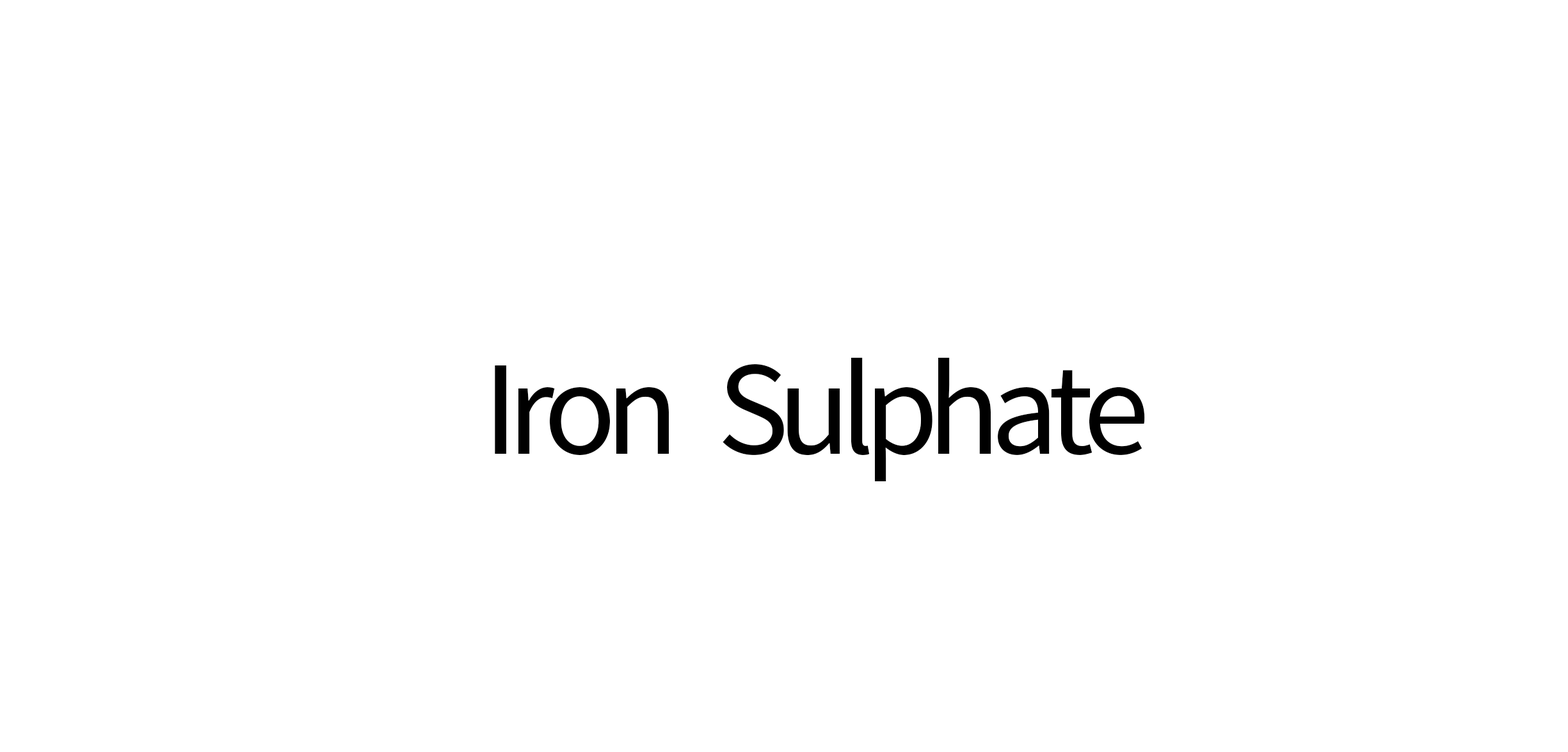
<style>
.page{position:relative;width:1568px;height:752px;background:#ffffff}
.page>*{position:absolute;margin:0}
.t1{font:134.5px "SourceSansPro-Regular";letter-spacing:-0.08em;color:#000000}
</style>
<div class="page">
<p class="t1" style="left:495px;top:358px;width:650px;height:123px">Iron   Sulphate</p>
</div>
